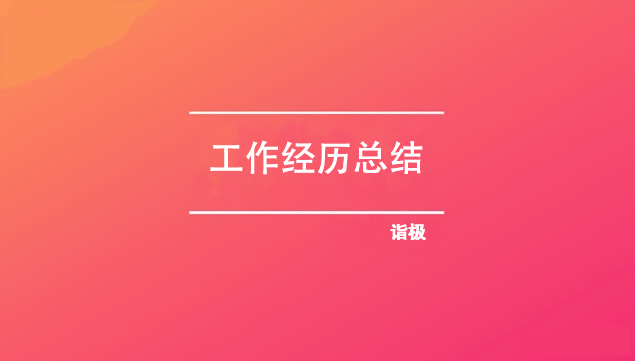
<style>
.page{position:relative;width:635px;height:361px}
.page>*{position:absolute;margin:0}
.t1{font:36px "AdobeHeitiStd-Regular";color:#ffffff}
.t2{font:18px "AdobeHeitiStd-Regular";color:#ffffff}
</style>
<div class="page">
<p class="t1" style="left:210px;top:140px;width:213px;height:35px">工作经历总结</p>
<p class="t2" style="left:390px;top:223px;width:35px;height:17px">诣极</p>
<p class="t2" style="left:391px;top:223px;width:35px;height:17px">诣极</p>
</div>
